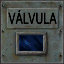
<style>
.page{position:relative;width:64px;height:64px}
.page>*{position:absolute;margin:0}
.t1{font:15.3px "ArialMT";color:#000000;font-weight:bold;scale:0.69 1}
</style>
<div class="page">
<p class="t1" style="left:8px;top:10px;width:49px;height:14px">VÁLVULA</p>
</div>
